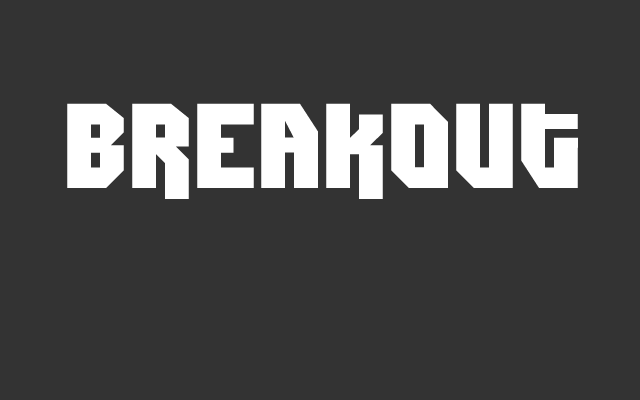
<style>
.page{position:relative;width:640px;height:400px;background:#333333}
.page>*{position:absolute;margin:0}
.t1{font:120px "Dimitri";color:#ffffff}
</style>
<div class="page">
<p class="t1" style="left:67px;top:103px;width:511px;height:96px">Breakout</p>
</div>
